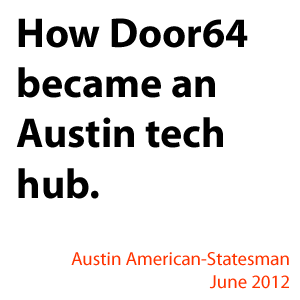
<style>
.page{position:relative;width:300px;height:300px;background:#ffffff}
.page>*{position:absolute;margin:0}
.t1{font:41.8px "MyriadPro-Bold";color:#000000}
.t2{font:18.9px "MyriadPro-Regular";color:#ff3300}
</style>
<div class="page">
<p class="t1" style="left:16px;top:18px;width:232px;height:181px">How Door64 <br>became an<br>Austin tech<br>hub.</p>
<p class="t2" style="left:71px;top:252px;width:218px;height:37px;text-align:right">Austin American-Statesman<br>June 2012</p>
</div>
